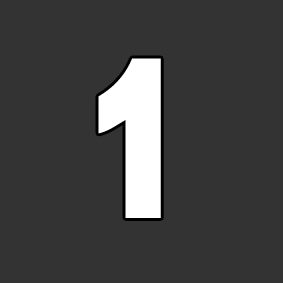
<style>
.page{position:relative;width:283px;height:283px;background:#333333}
.page>*{position:absolute;margin:0}
.t1{font:350px "Aharoni-Bold";color:#ffffff}
</style>
<div class="page">
<p class="t1" style="left:98px;top:58px;width:63px;height:160px">1</p>
</div>
